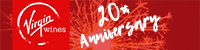
<style>
.page{position:relative;width:200px;height:50px}
.page>*{position:absolute;margin:0}
.t1{font:16.2px "LemonTuesday";color:#ffffff;font-weight:bold}
.t2{font:26.2px "LemonTuesday";color:#ffffff;font-weight:bold}
.t3{font:13.8px "LemonTuesday";color:#ffffff;font-weight:bold}
</style>
<div class="page">
<p class="t1" style="left:80px;top:2px;width:81px;height:47px;text-align:center;rotate:-17deg"><span class="t2">20</span><span class="t3">th <br></span>Anniversary</p>
</div>
